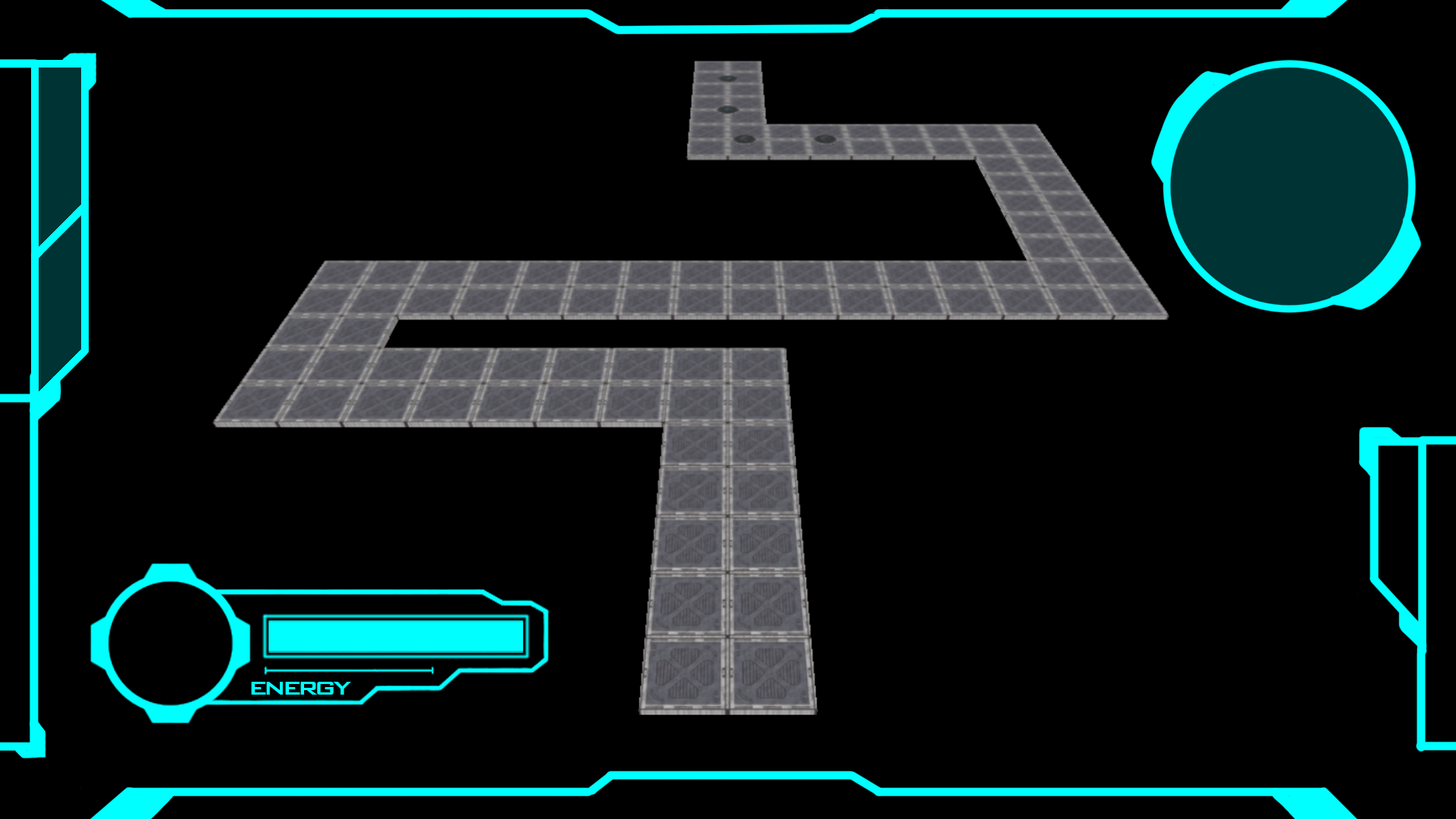
<style>
.page{position:relative;width:1456px;height:819px;background:#000000}
.page>*{position:absolute;margin:0}
.t1{font:30.5px "BankGothicBT-Medium";letter-spacing:-0.1em;color:#00ffff}
</style>
<div class="page">
<p class="t1" style="left:251px;top:682px;width:100px;height:13px">energy</p>
</div>
